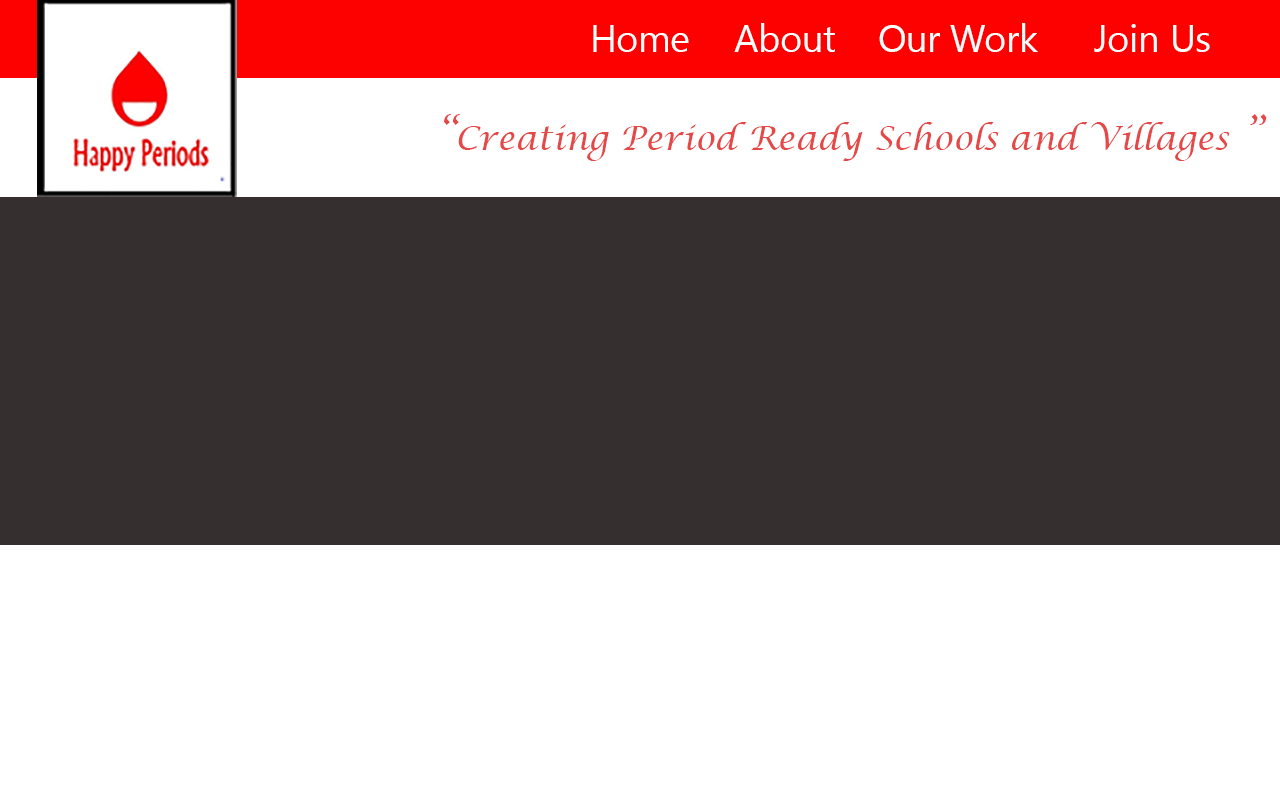
<style>
.page{position:relative;width:1280px;height:800px;background:#ffffff}
.page>*{position:absolute;margin:0}
.t1{font:37.5px "SegoeUI";color:#fdfdfd}
.t2{font:33.3px "LucidaCalligraphy-Italic";color:#e44948}
.t3{font:41.7px "LucidaCalligraphy-Italic";color:#e44948}
</style>
<div class="page">
<p class="t1" style="left:593px;top:23px;width:617px;height:29px">Home  About  Our Work  Join Us</p>
<p class="t2" style="left:444px;top:114px;width:823px;height:47px"><span class="t3">“</span>Creating Period Ready Schools and Villages<span class="t3"> ”</span></p>
</div>
